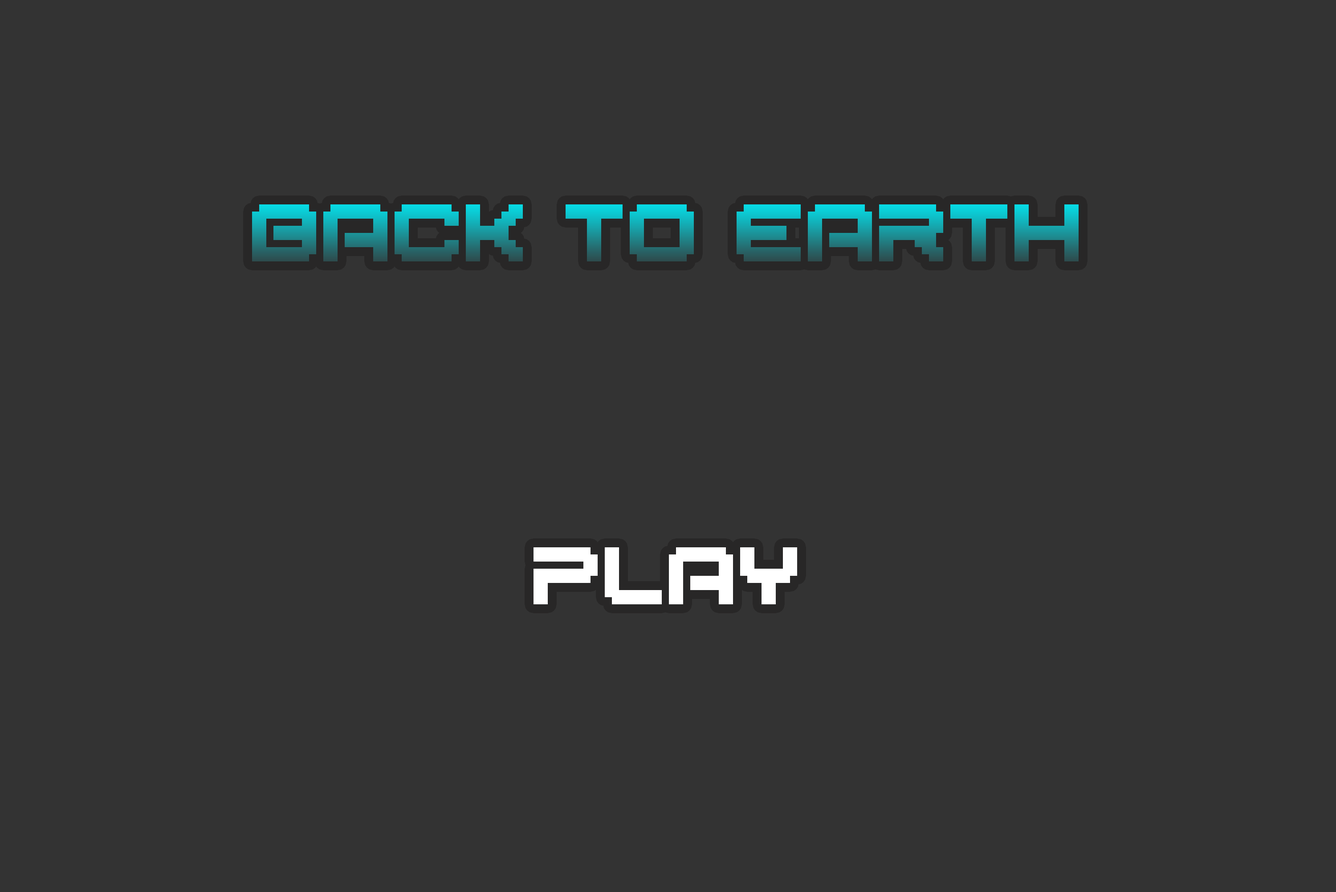
<style>
.page{position:relative;width:1336px;height:892px;background:#333333}
.page>*{position:absolute;margin:0}
.t1{font:85.5px "BMjapanA12"}
.t2{font:85.5px "BMjapanA12";color:#ffffff}
</style>
<div class="page">
<p class="t1" style="left:252px;top:204px;width:827px;height:57px">BACK TO EARTH</p>
<p class="t2" style="left:534px;top:547px;width:263px;height:57px">PLAY</p>
</div>
